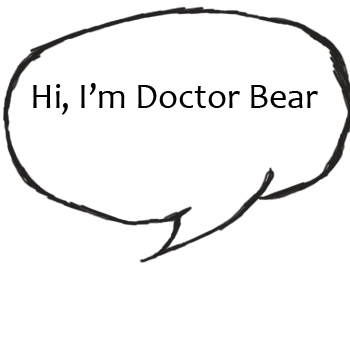
<style>
.page{position:relative;width:350px;height:350px;background:#ffffff}
.page>*{position:absolute;margin:0}
.t1{font:36px "Candara";color:#000000}
</style>
<div class="page">
<p class="t1" style="left:33px;top:83px;width:285px;height:32px">Hi, I’m Doctor Bear</p>
</div>
